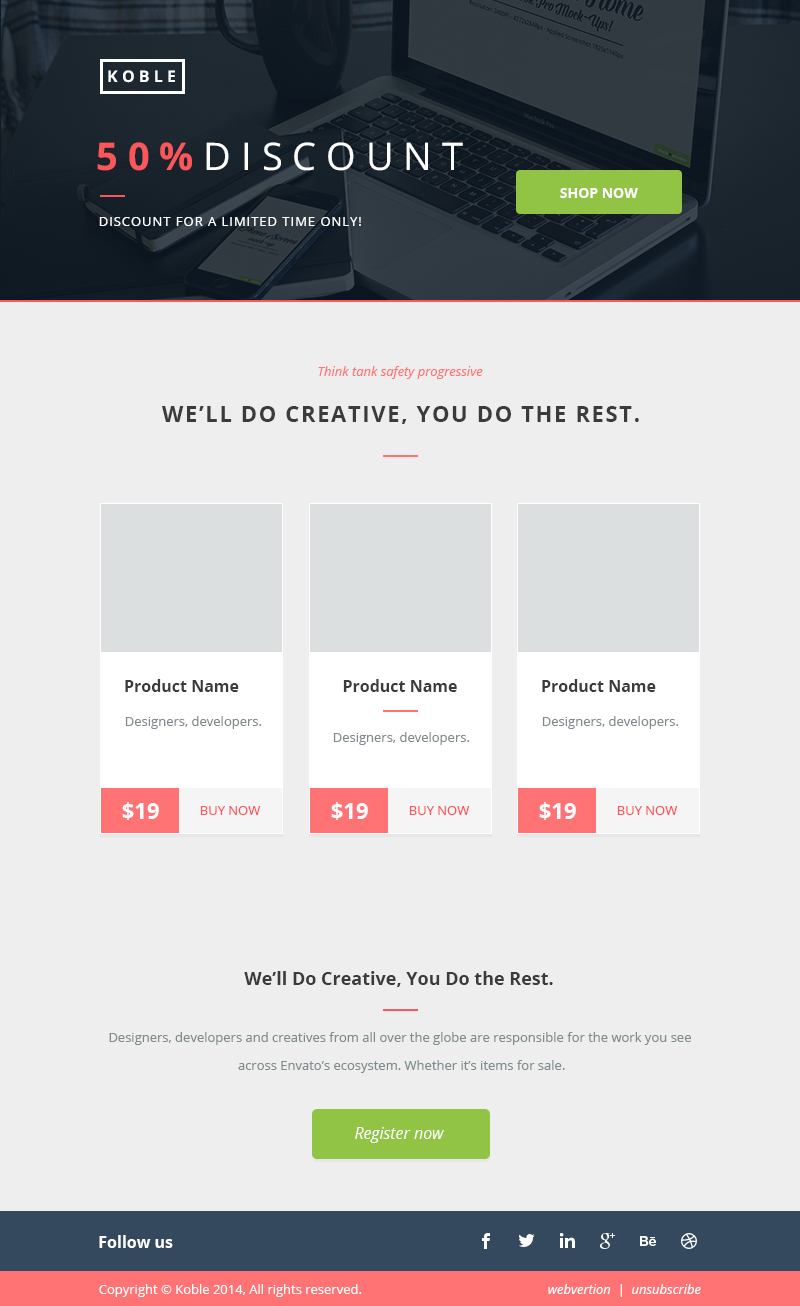
<style>
.page{position:relative;width:800px;height:1306px;background:#eeeeee}
.page>*{position:absolute;margin:0}
.t1{font:16px "OpenSans-Bold";letter-spacing:0.26em;color:#ffffff;text-transform:uppercase}
.t2{font:38px "OpenSans";letter-spacing:0.26em;color:#ffffff;text-transform:uppercase}
.t3{font:38px "OpenSans-Bold";letter-spacing:0.26em;color:#f95759;text-transform:uppercase}
.t4{font:14px "OpenSans-Bold";color:#ffffff;text-transform:uppercase}
.t5{font:13px "OpenSans";letter-spacing:0.075em;color:#ffffff;text-transform:uppercase}
.t6{font:13px "OpenSans-Italic";color:#ff7375}
.t7{font:22px "OpenSans-Bold";letter-spacing:0.075em;color:#3b3b3b;text-transform:uppercase}
.t8{font:16px "OpenSans-Bold";color:#3b3b3b}
.t9{font:13px "OpenSans";color:#7f8c8d}
.t10{font:22px "OpenSans-Bold";color:#ffffff}
.t11{font:13px "OpenSans";color:#f95759;text-transform:uppercase}
.t12{font:18px "OpenSans-Bold";color:#3b3b3b}
.t13{font:13px/28px "OpenSans";color:#7f8c8d}
.t14{font:16px "OpenSans-Italic";color:#ffffff}
.t15{font:16px "OpenSans-Bold";color:#ffffff}
.t16{font:13px "OpenSans";color:#ffffff}
.t17{font:13px "OpenSans-Italic";color:#ffffff}
</style>
<div class="page">
<p class="t1" style="left:108px;top:70px;width:67px;height:13px">koble</p>
<p class="t2" style="left:97px;top:142px;width:366px;height:29px"><span class="t3">50%</span>discount</p>
<p class="t4" style="left:560px;top:188px;width:78px;height:10px">Shop now</p>
<p class="t5" style="left:99px;top:217px;width:262px;height:9px">discount for a limited time only!</p>
<p class="t6" style="left:318px;top:366px;width:165px;height:13px">Think tank safety progressive</p>
<p class="t7" style="left:162px;top:406px;width:477px;height:18px">We’ll Do Creative, you Do the Rest.</p>
<p class="t8" style="left:125px;top:679px;width:114px;height:13px">Product Name</p>
<p class="t8" style="left:343px;top:679px;width:114px;height:13px">Product Name</p>
<p class="t8" style="left:542px;top:679px;width:114px;height:13px">Product Name</p>
<p class="t9" style="left:125px;top:716px;width:137px;height:13px">Designers, developers.</p>
<p class="t9" style="left:542px;top:716px;width:137px;height:13px">Designers, developers.</p>
<p class="t9" style="left:333px;top:732px;width:137px;height:13px">Designers, developers.</p>
<p class="t10" style="left:122px;top:802px;width:37px;height:18px">$19</p>
<p class="t11" style="left:200px;top:806px;width:61px;height:9px">buy now</p>
<p class="t10" style="left:331px;top:802px;width:37px;height:18px">$19</p>
<p class="t11" style="left:409px;top:806px;width:61px;height:9px">buy now</p>
<p class="t10" style="left:539px;top:802px;width:37px;height:18px">$19</p>
<p class="t11" style="left:617px;top:806px;width:61px;height:9px">buy now</p>
<p class="t12" style="left:244px;top:971px;width:309px;height:16px">We’ll Do Creative, You Do the Rest.</p>
<p class="t13" style="left:109px;top:1032px;width:582px;height:41px;text-align:center">Designers, developers and creatives from all over the globe are responsible for the work you see across Envato’s ecosystem. Whether it’s items for sale.</p>
<p class="t14" style="left:355px;top:1127px;width:89px;height:16px">Register now</p>
<p class="t15" style="left:99px;top:1235px;width:74px;height:13px">Follow us</p>
<p class="t16" style="left:99px;top:1284px;width:263px;height:13px">Copyright © Koble 2014, All rights reserved.</p>
<p class="t17" style="left:548px;top:1284px;width:153px;height:13px">webvertion  |  unsubscribe</p>
</div>
